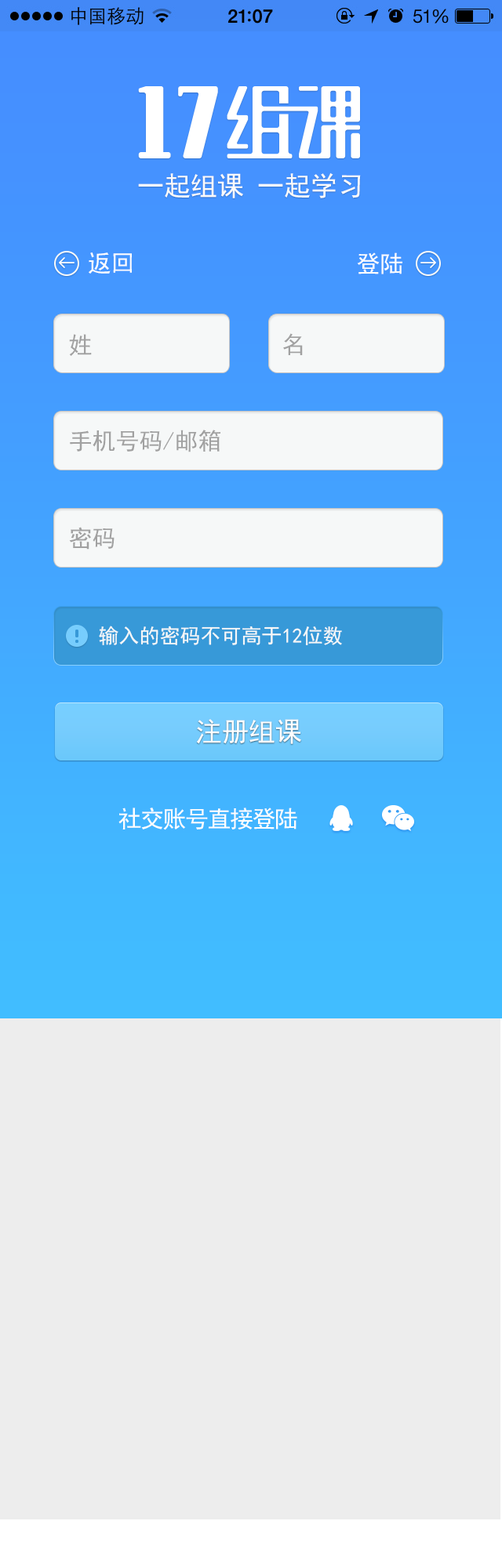
<style>
.page{position:relative;width:502px;height:1568px;background:#ededed}
.page>*{position:absolute;margin:0}
.t1{font:26.7px "SimHei";color:#fbfbfb}
.t2{font:23.5px "SimHei";color:#fefefe}
.t3{font:23.5px "SimHei";color:#a1a1a1}
.t4{font:20.4px "SimHei";color:#f6f8f8}
.t5{font:26.7px "SimHei";color:#fefefe}
.t6{font:23.5px "SimHei";letter-spacing:-0.05em;color:#fefefe}
</style>
<div class="page">
<p class="t1" style="left:138px;top:172px;width:223px;height:26px">一起组课 一起学习</p>
<p class="t2" style="left:89px;top:252px;width:43px;height:22px">返回</p>
<p class="t2" style="left:357px;top:252px;width:45px;height:22px">登陆</p>
<p class="t3" style="left:69px;top:334px;width:23px;height:22px">姓</p>
<p class="t3" style="left:283px;top:333px;width:20px;height:22px">名</p>
<p class="t3" style="left:70px;top:430px;width:150px;height:22px">手机号码/邮箱</p>
<p class="t3" style="left:69px;top:527px;width:45px;height:23px">密码</p>
<p class="t4" style="left:99px;top:626px;width:243px;height:19px">输入的密码不可高于12位数</p>
<p class="t5" style="left:196px;top:719px;width:105px;height:25px">注册组课</p>
<p class="t6" style="left:118px;top:808px;width:179px;height:22px">社交账号直接登陆</p>
</div>
